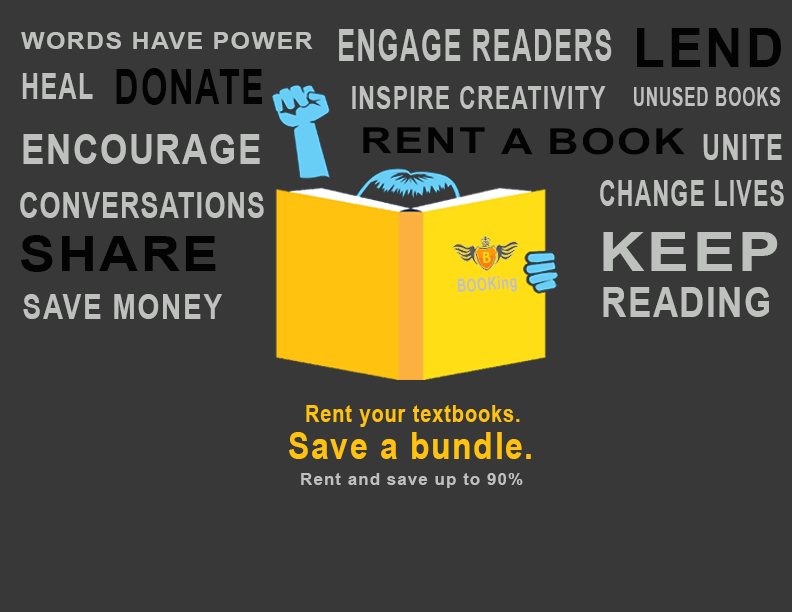
<style>
.page{position:relative;width:792px;height:612px;background:#383838}
.page>*{position:absolute;margin:0}
.t1{font:45.4px "Arial-BoldMT";letter-spacing:0.05em;color:#bfc1bf;scale:0.6 1}
.t2{font:54.2px "Arial-BoldMT";letter-spacing:0.05em;color:#030303;scale:0.97 1}
.t3{font:22.6px "Arial-BoldMT";letter-spacing:0.05em;color:#bfc1bf;scale:1.11 1}
.t4{font:36px "Arial-BoldMT";letter-spacing:0.05em;color:#bfc1bf;scale:0.7 1}
.t5{font:49.4px "Arial-BoldMT";letter-spacing:0.05em;color:#030303;scale:0.69 1}
.t6{font:32.4px "Arial-BoldMT";letter-spacing:0.05em;color:#bfc1bf;scale:0.72 1}
.t7{font:26.3px "Arial-BoldMT";letter-spacing:0.05em;color:#bfc1bf;scale:0.65 1}
.t8{font:42.1px "Arial-BoldMT";letter-spacing:0.05em;color:#bfc1bf;scale:0.82 1}
.t9{font:36px "Arial-BoldMT";letter-spacing:0.05em;color:#030303;scale:1.21 1}
.t10{font:35.6px "Arial-BoldMT";letter-spacing:0.05em;color:#bfc1bf;scale:0.65 1}
.t11{font:35.6px "Arial-BoldMT";letter-spacing:0.05em;color:#bfc1bf;scale:0.75 1}
.t12{font:54.2px "Arial-BoldMT";letter-spacing:0.05em;color:#bfc1bf;scale:1.17 1}
.t13{font:48.2px "Arial-BoldMT";letter-spacing:0.05em;color:#030303;scale:1.11 1}
.t14{font:18px "Arial-BoldMT";letter-spacing:0.05em;color:#bfc1bf;scale:0.7 1}
.t15{font:33.6px "Arial-BoldMT";letter-spacing:0.05em;color:#bfc1bf;scale:0.85 1}
.t16{font:40.9px "Arial-BoldMT";letter-spacing:0.05em;color:#bfc1bf;scale:0.85 1}
.t17{font:23.9px "Arial-BoldMT";letter-spacing:0.05em;color:#ffc20e;scale:0.83 1}
.t18{font:37.3px "Arial-BoldMT";letter-spacing:0.05em;color:#ffc20e;scale:0.86 1}
.t19{font:16.6px "Arial-BoldMT";letter-spacing:0.05em;color:#bfc1bf;scale:1.05 1}
</style>
<div class="page">
<p class="t1" style="left:339px;top:29px;width:273px;height:32px">ENGAGE READERS</p>
<p class="t2" style="left:637px;top:28px;width:144px;height:39px">LEND</p>
<p class="t3" style="left:21px;top:32px;width:292px;height:17px">WORDS HAVE POWER</p>
<p class="t4" style="left:22px;top:73px;width:71px;height:26px">HEAL</p>
<p class="t5" style="left:116px;top:68px;width:146px;height:37px">DONATE</p>
<p class="t6" style="left:352px;top:86px;width:254px;height:23px">INSPIRE CREATIVITY</p>
<p class="t7" style="left:634px;top:87px;width:147px;height:19px">UNUSED BOOKS</p>
<p class="t8" style="left:23px;top:134px;width:237px;height:30px">ENCOURAGE</p>
<p class="t9" style="left:363px;top:127px;width:322px;height:28px">RENT A BOOK</p>
<p class="t4" style="left:703px;top:134px;width:79px;height:26px">UNITE</p>
<p class="t10" style="left:600px;top:180px;width:184px;height:26px">CHANGE LIVES</p>
<p class="t11" style="left:20px;top:192px;width:244px;height:26px">CONVERSATIONS</p>
<p class="t12" style="left:603px;top:232px;width:175px;height:39px">KEEP</p>
<p class="t13" style="left:21px;top:235px;width:195px;height:37px">SHARE</p>
<p class="t14" style="left:457px;top:275px;width:60px;height:17px;rotate:-4deg">BOOKing</p>
<p class="t15" style="left:23px;top:294px;width:199px;height:25px">SAVE MONEY</p>
<p class="t16" style="left:603px;top:287px;width:166px;height:30px">READING</p>
<p class="t17" style="left:306px;top:405px;width:214px;height:22px">Rent your textbooks.</p>
<p class="t18" style="left:289px;top:432px;width:242px;height:27px">Save a bundle.</p>
<p class="t19" style="left:301px;top:473px;width:222px;height:15px">Rent and save up to 90%</p>
</div>
